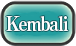
<style>
.page{position:relative;width:76px;height:46px}
.page>*{position:absolute;margin:0}
.t1{font:20px "RyuminPro-ExBold";letter-spacing:-0.08em;color:#ffffff;scale:0.9 1}
</style>
<div class="page">
<p class="t1" style="left:6px;top:16px;width:63px;height:15px">Kembali</p>
</div>
